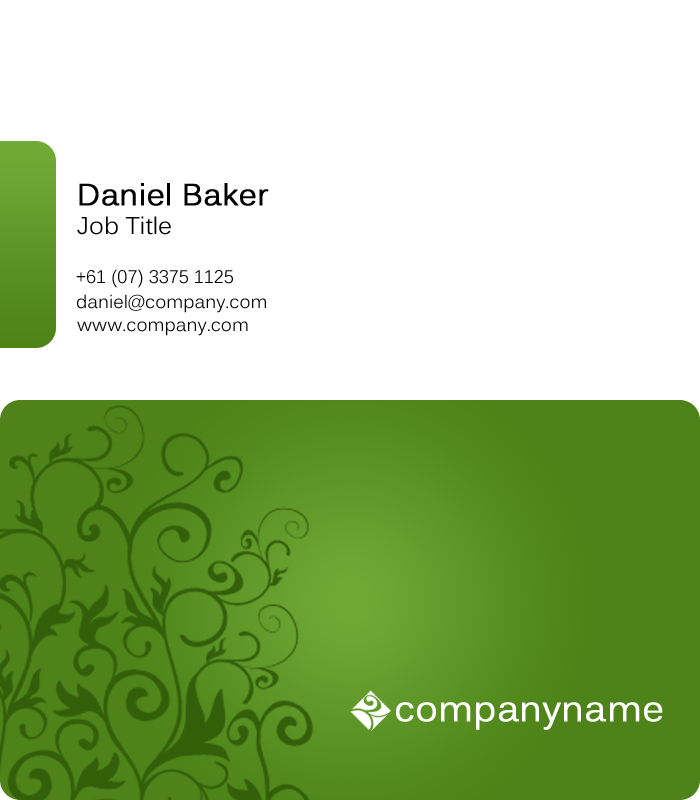
<style>
.page{position:relative;width:700px;height:800px;background:#ffffff}
.page>*{position:absolute;margin:0}
.t1{font:30px "Kalinga";color:#000000;font-weight:bold}
.t2{font:24px "Kalinga";color:#000000}
.t3{font:18px "Kalinga";color:#000000}
.t4{font:36px "Kalinga";color:#ffffff;font-weight:bold}
</style>
<div class="page">
<p class="t1" style="left:79px;top:183px;width:190px;height:23px">Daniel Baker</p>
<p class="t2" style="left:77px;top:216px;width:94px;height:19px">Job Title</p>
<p class="t3" style="left:76px;top:269px;width:157px;height:19px">+61 (07) 3375 1125</p>
<p class="t3" style="left:77px;top:294px;width:189px;height:19px">daniel@company.com</p>
<p class="t3" style="left:77px;top:321px;width:171px;height:15px">www.company.com</p>
<p class="t4" style="left:396px;top:702px;width:267px;height:28px">companyname</p>
</div>
